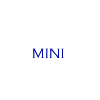
<style>
.page{position:relative;width:100px;height:100px;background:#ffffff}
.page>*{position:absolute;margin:0}
.t1{font:14px "CopperplateGothic-Light";color:#000b9a}
</style>
<div class="page">
<p class="t1" style="left:32px;top:48px;width:32px;height:10px">MINI</p>
</div>
